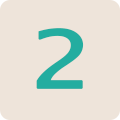
<style>
.page{position:relative;width:120px;height:120px;background:#eee4da}
.page>*{position:absolute;margin:0}
.t1{font:80.2px "LucidaSans";color:#23ada0;font-weight:bold;scale:1.29 1}
</style>
<div class="page">
<p class="t1" style="left:36px;top:28px;width:48px;height:61px">2</p>
</div>
